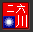
<style>
.page{position:relative;width:33px;height:32px;background:#f20000}
.page>*{position:absolute;margin:0}
.t1{font:10.4px "SimSun";color:#ffffff}
.t2{font:11.7px "SimSun";color:#ffffff}
</style>
<div class="page">
<p class="t1" style="left:7px;top:4px;width:18px;height:9px">二六</p>
<p class="t2" style="left:16px;top:15px;width:11px;height:12px">川</p>
</div>
